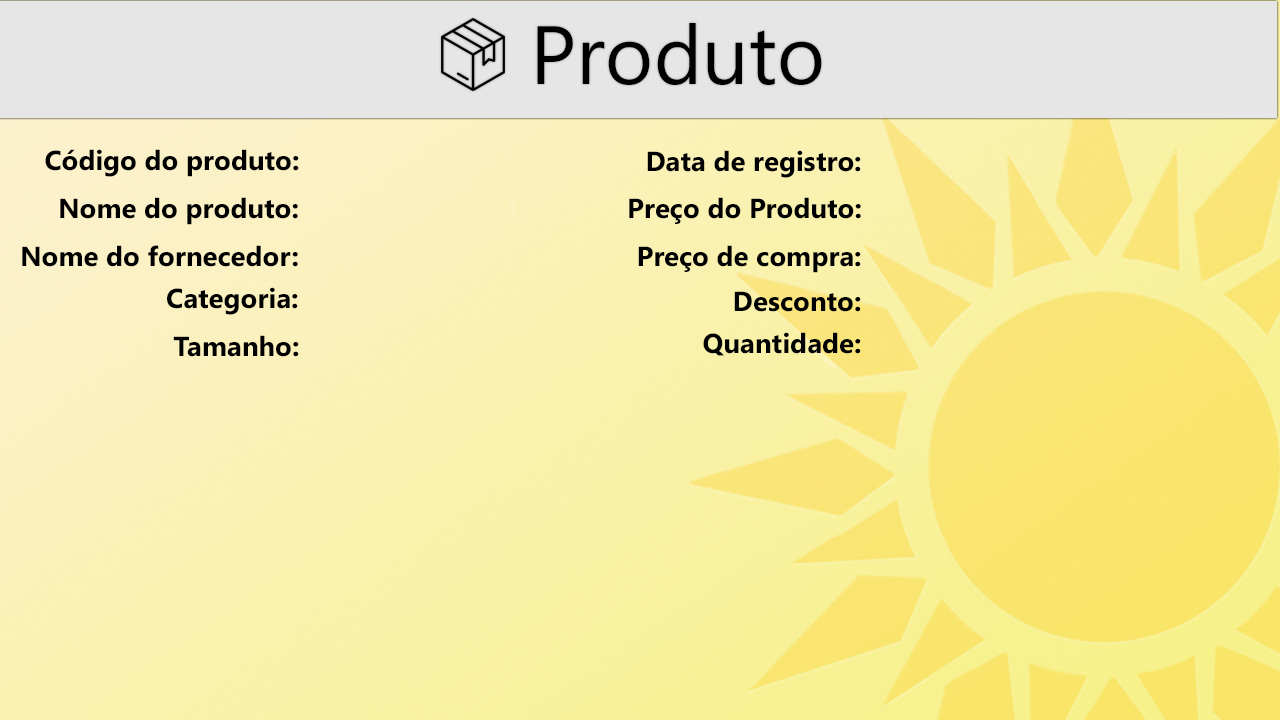
<style>
.page{position:relative;width:1280px;height:720px}
.page>*{position:absolute;margin:0}
.t1{font:82.5px "SegoeUI";color:#000000}
.t2{font:27.5px "SegoeUI-Bold";color:#000000}
</style>
<div class="page">
<p class="t1" style="left:537px;top:23px;width:285px;height:62px">Produto</p>
<p class="t2" style="left:45px;top:149px;width:254px;height:28px">Código do produto:</p>
<p class="t2" style="left:647px;top:150px;width:214px;height:28px">Data de registro:</p>
<p class="t2" style="left:60px;top:197px;width:238px;height:28px">Nome do produto:</p>
<p class="t2" style="left:629px;top:197px;width:232px;height:27px">Preço do Produto:</p>
<p class="t2" style="left:22px;top:245px;width:276px;height:22px">Nome do fornecedor:</p>
<p class="t2" style="left:638px;top:245px;width:223px;height:28px">Preço de compra:</p>
<p class="t2" style="left:167px;top:287px;width:131px;height:28px">Categoria:</p>
<p class="t2" style="left:734px;top:291px;width:127px;height:21px">Desconto:</p>
<p class="t2" style="left:173px;top:335px;width:126px;height:22px">Tamanho:</p>
<p class="t2" style="left:703px;top:332px;width:158px;height:24px">Quantidade:</p>
</div>
